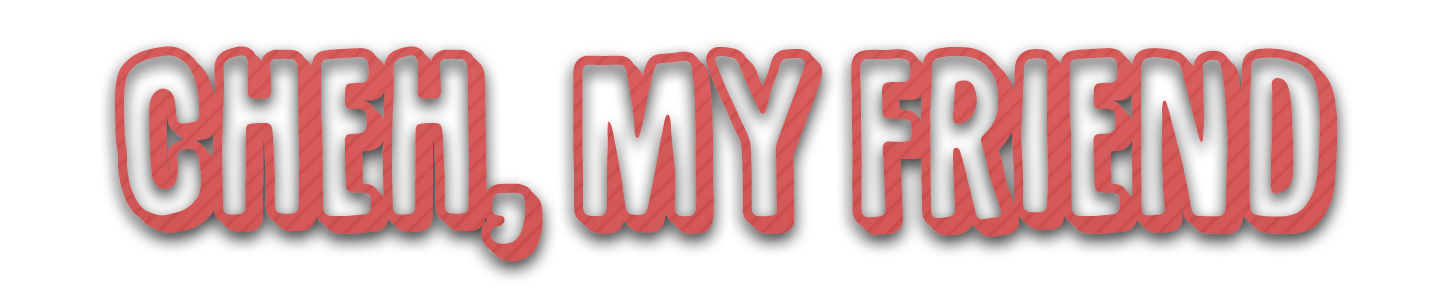
<style>
.page{position:relative;width:1429px;height:308px;background:#ffffff}
.page>*{position:absolute;margin:0}
.t1{font:177px "SugarpunchDEMO";color:#d55858}
</style>
<div class="page">
<p class="t1" style="left:114px;top:46px;width:1224px;height:216px">Cheh, my friend</p>
</div>
